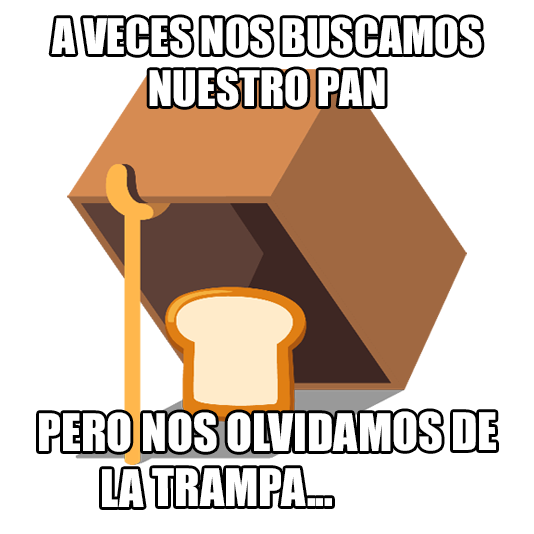
<style>
.page{position:relative;width:534px;height:534px;background:#ffffff}
.page>*{position:absolute;margin:0}
.t1{font:45.2px "Impact";color:#ffffff}
.t2{font:47.8px "Impact";color:#ffffff}
</style>
<div class="page">
<p class="t1" style="left:51px;top:17px;width:431px;height:90px;text-align:center">A VECES NOS BUSCAMOS<br>NUESTRO PAN</p>
<p class="t2" style="left:39px;top:411px;width:457px;height:96px;text-align:center">PERO NOS OLVIDAMOS DE<br>LA TRAMPA...</p>
</div>
